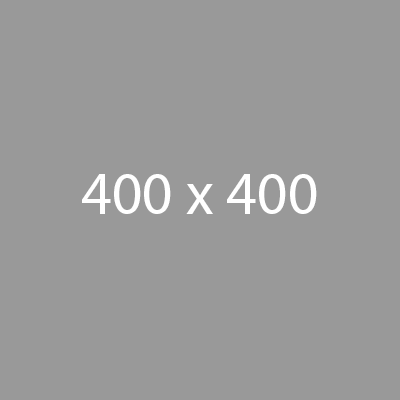
<style>
.page{position:relative;width:400px;height:400px;background:#999999}
.page>*{position:absolute;margin:0}
.t1{font:60px "MyriadPro-Regular";color:#ffffff}
</style>
<div class="page">
<p class="t1" style="left:82px;top:174px;width:235px;height:40px">400 x 400</p>
</div>
